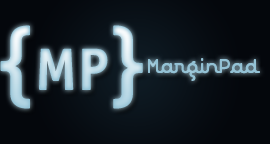
<style>
.page{position:relative;width:270px;height:144px;background:#04070c}
.page>*{position:absolute;margin:0}
.t1{font:60px "OfficinaSansITCStd-Bold"}
.t2{font:90px "OfficinaSansITCStd-Bold"}
.t3{font:25px "REdevanceScript";color:#93c1d4}
</style>
<div class="page">
<p class="t1" style="left:0px;top:25px;width:143px;height:84px"><span class="t2">{</span>MP<span class="t2">}</span></p>
<p class="t3" style="left:148px;top:58px;width:112px;height:23px">MarginPad</p>
</div>
